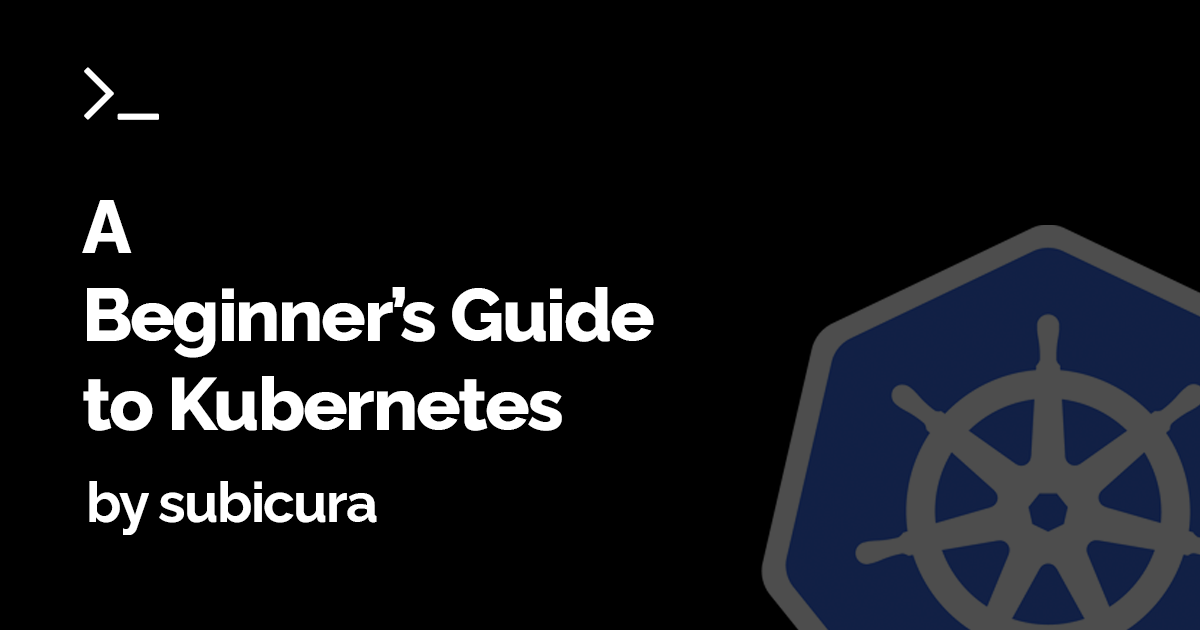
<style>
.page{position:relative;width:1200px;height:630px;background:#000000}
.page>*{position:absolute;margin:0}
.t1{font:74px "Raleway-ExtraBold";letter-spacing:-0.03em;color:#ffffff}
.t2{font:56px "Raleway-Bold";letter-spacing:-0.03em;color:#ffffff}
</style>
<div class="page">
<p class="t1" style="left:82px;top:200px;width:572px;height:231px">A<br>Beginner’s Guide<br>to Kubernetes</p>
<p class="t2" style="left:89px;top:481px;width:288px;height:54px">by subicura</p>
</div>
